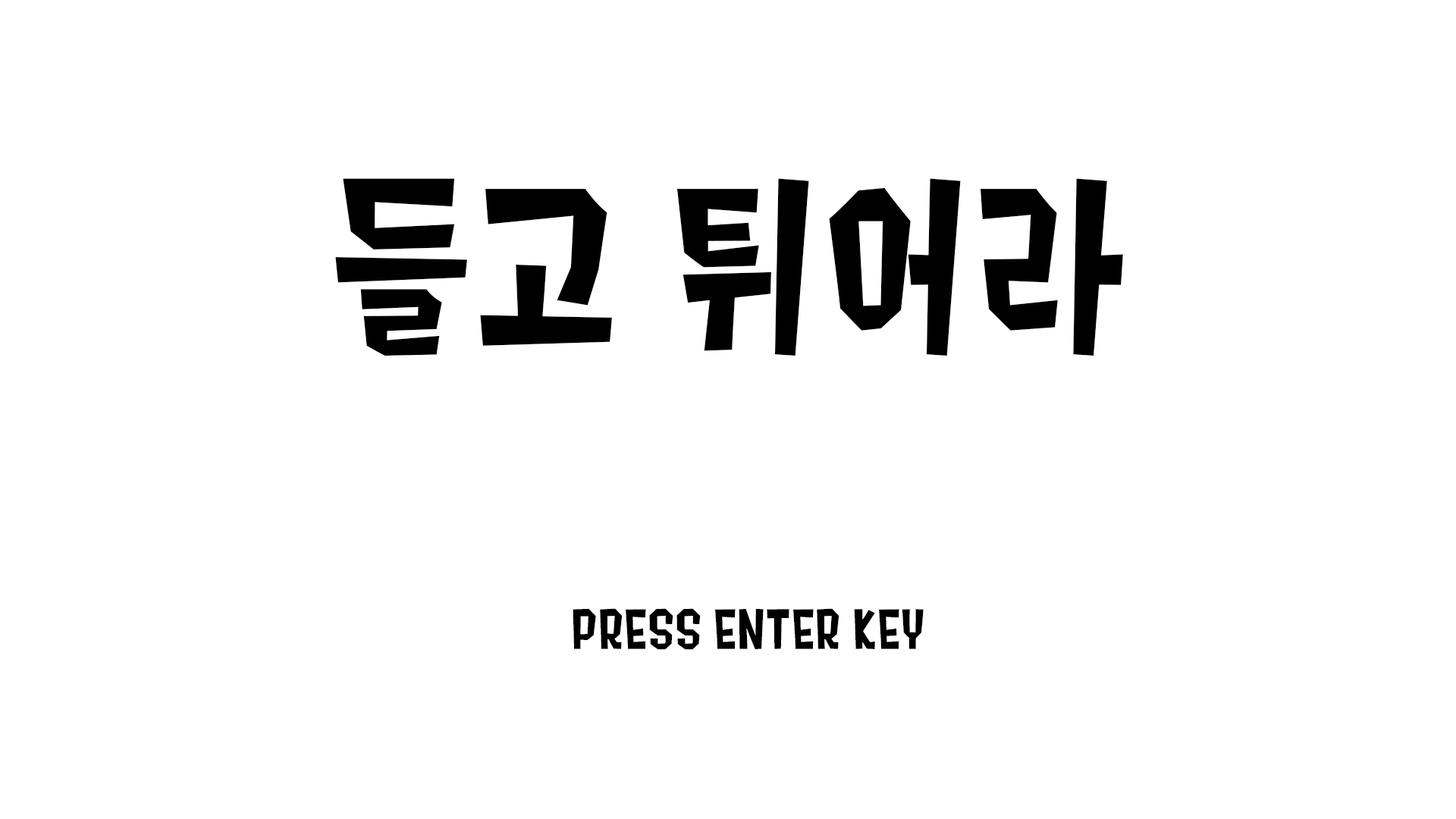
<style>
.page{position:relative;width:1456px;height:819px;background:#ffffff}
.page>*{position:absolute;margin:0}
.t1{font:227.5px "Splat2K";letter-spacing:0.01em;color:#000000}
.t2{font:54.6px "Splat2K";letter-spacing:0.01em;color:#000000}
</style>
<div class="page">
<p class="t1" style="left:335px;top:178px;width:788px;height:178px">들고 튀어라</p>
<p class="t2" style="left:573px;top:608px;width:351px;height:42px">PRESS ENTER KEY</p>
</div>
